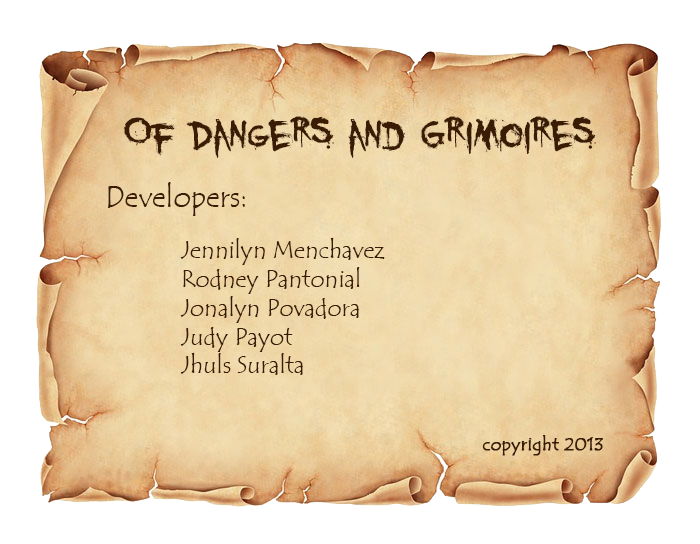
<style>
.page{position:relative;width:700px;height:544px;background:#ffffff}
.page>*{position:absolute;margin:0}
.t1{font:59px "YouMurdererBB";color:#3a1b04}
.t2{font:30px "TempusSansITC";color:#3a1b04}
.t3{font:24px "TempusSansITC";color:#3a1b04}
.t4{font:18px "TempusSansITC";color:#3a1b04;font-weight:bold}
</style>
<div class="page">
<p class="t1" style="left:123px;top:116px;width:473px;height:42px">Of Dangers and Grimoires</p>
<p class="t2" style="left:108px;top:182px;width:137px;height:34px">Developers:</p>
<p class="t3" style="left:180px;top:237px;width:205px;height:138px">Jennilyn Menchavez<br>Rodney Pantonial<br>Jonalyn Povadora<br>Judy Payot<br>Jhuls Suralta</p>
<p class="t4" style="left:482px;top:435px;width:121px;height:21px">copyright 2013</p>
</div>
